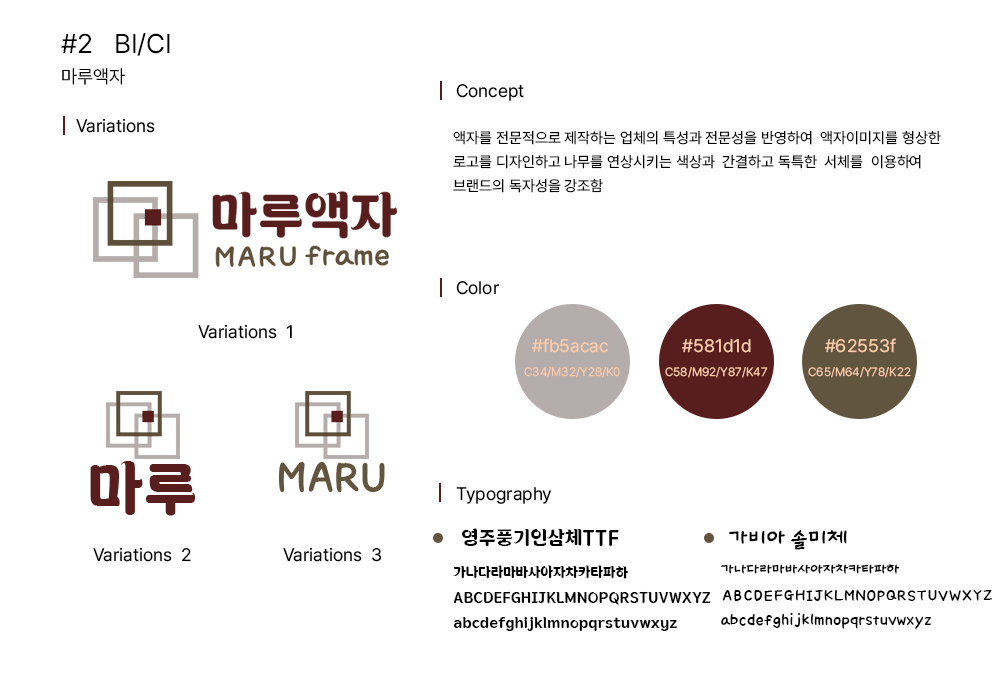
<style>
.page{position:relative;width:1000px;height:700px;background:#ffffff}
.page>*{position:absolute;margin:0}
.t1{font:27px "Pretendard-Regular";color:#000000}
.t2{font:18.7px "Pretendard-Regular";color:#000000}
.t3{font:18px "Pretendard-Regular";color:#000000}
.t4{font:15px/24px "Pretendard-Regular";color:#000000}
.t5{font:18px "Pretendard-Regular";color:#fccba9}
.t6{font:12px "Pretendard-Regular";color:#fccba9}
.t7{font:18px "YEONGJUPunggiGinseng-TTF";color:#000000}
.t8{font:25px "GabiaSolmee";letter-spacing:-0.05em;color:#000000}
.t9{font:13px "YEONGJUPunggiGinseng-TTF";color:#000000}
.t10{font:17px "GabiaSolmee";letter-spacing:-0.05em;color:#000000}
</style>
<div class="page">
<p class="t1" style="left:61px;top:33px;width:109px;height:23px">#2   BI/CI</p>
<p class="t2" style="left:62px;top:68px;width:63px;height:17px">마루액자</p>
<p class="t3" style="left:456px;top:84px;width:68px;height:17px">Concept</p>
<p class="t3" style="left:76px;top:118px;width:79px;height:15px">Variations</p>
<p class="t4" style="left:453px;top:130px;width:488px;height:63px">액자를 전문적으로 제작하는 업체의 특성과 전문성을 반영하여  액자이미지를 형상한<br>로고를 디자인하고 나무를 연상시키는 색상과  간결하고 독특한  서체를  이용하여<br>브랜드의 독자성을 강조함</p>
<p class="t3" style="left:456px;top:281px;width:44px;height:14px">Color</p>
<p class="t3" style="left:198px;top:324px;width:94px;height:15px">Variations  1</p>
<p class="t5" style="left:532px;top:338px;width:76px;height:15px">#fb5acac</p>
<p class="t5" style="left:682px;top:339px;width:69px;height:14px">#581d1d</p>
<p class="t5" style="left:825px;top:338px;width:71px;height:15px">#62553f</p>
<p class="t6" style="left:524px;top:367px;width:96px;height:11px">C34/M32/Y28/K0</p>
<p class="t6" style="left:665px;top:367px;width:103px;height:11px">C58/M92/Y87/K47</p>
<p class="t6" style="left:808px;top:367px;width:103px;height:11px">C65/M64/Y78/K22</p>
<p class="t3" style="left:456px;top:487px;width:96px;height:17px">Typography</p>
<p class="t7" style="left:462px;top:528px;width:157px;height:18px">영주풍기인삼체TTF</p>
<p class="t8" style="left:729px;top:530px;width:118px;height:20px">가비아 솔미체</p>
<p class="t3" style="left:93px;top:547px;width:98px;height:15px">Variations  2</p>
<p class="t3" style="left:283px;top:547px;width:99px;height:15px">Variations  3</p>
<p class="t9" style="left:453px;top:565px;width:175px;height:14px">가나다라마바사아자차카타파하</p>
<p class="t10" style="left:721px;top:564px;width:179px;height:10px">가나다라마바사아자차카타파하</p>
<p class="t9" style="left:453px;top:591px;width:258px;height:14px">ABCDEFGHIJKLMNOPQRSTUVWXYZ</p>
<p class="t10" style="left:722px;top:590px;width:270px;height:11px">ABCDEFGHIJKLMNOPQRSTUVWXYZ</p>
<p class="t9" style="left:453px;top:617px;width:224px;height:14px">abcdefghijklmnopqrstuvwxyz</p>
<p class="t10" style="left:721px;top:613px;width:211px;height:16px">abcdefghijklmnopqrstuvwxyz</p>
</div>
